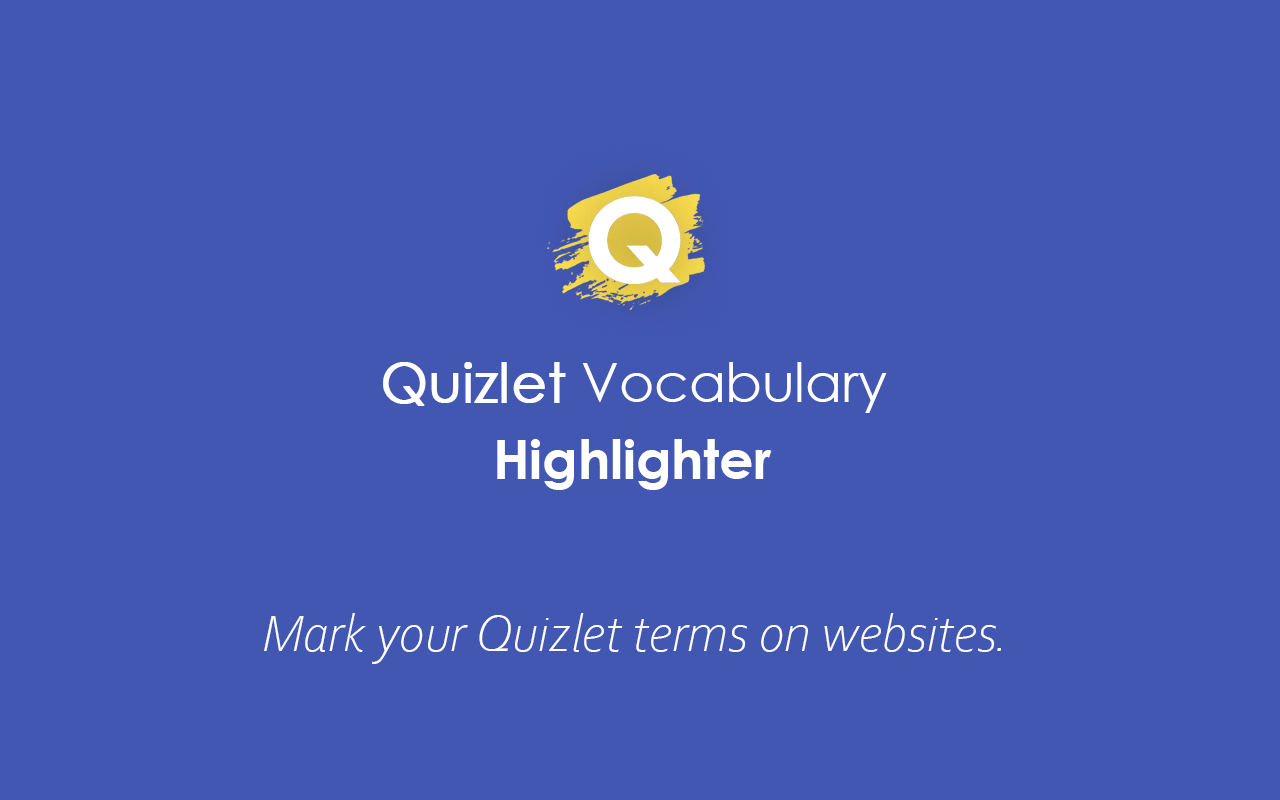
<style>
.page{position:relative;width:1280px;height:800px;background:#4257b2}
.page>*{position:absolute;margin:0}
.t1{font:53.6px "CenturyGothic";color:#ffffff}
.t2{font:53.6px "CenturyGothic";color:#ffffff;font-weight:bold}
.t3{font:53.6px "CenturyGothic-Bold";color:#ffffff}
.t4{font:53.6px "CorbelLight-Italic";color:#ffffff}
</style>
<div class="page">
<p class="t1" style="left:383px;top:362px;width:504px;height:51px"><span class="t2">Quizlet</span> Vocabulary</p>
<p class="t3" style="left:497px;top:439px;width:275px;height:51px">Highlighter</p>
<p class="t4" style="left:264px;top:613px;width:737px;height:51px">Mark your Quizlet terms on websites.</p>
</div>
